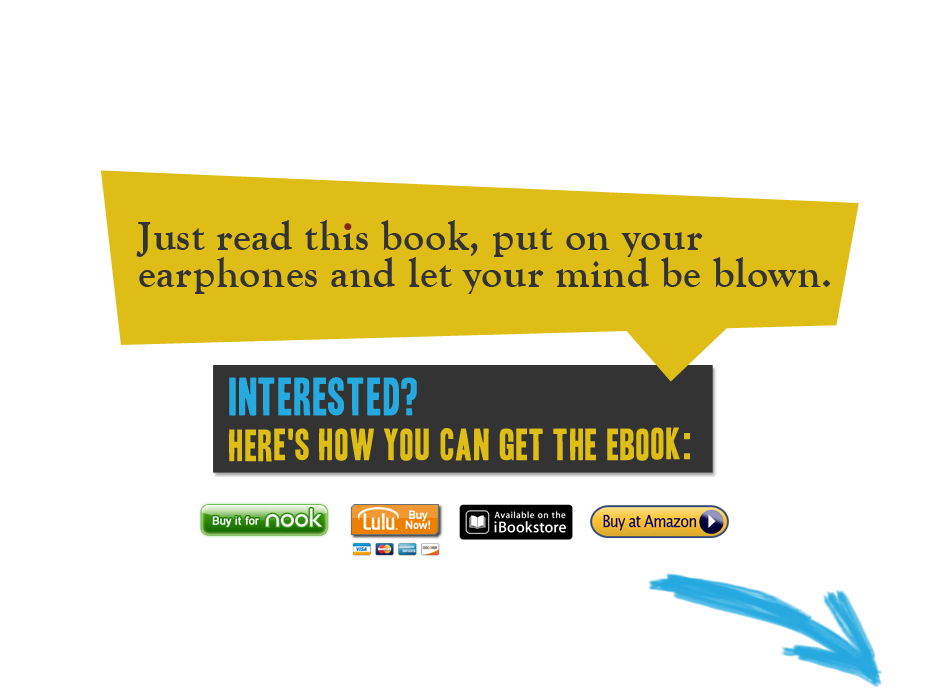
<style>
.page{position:relative;width:950px;height:700px;background:#ffffff}
.page>*{position:absolute;margin:0}
.t1{font:41.7px/37.5px "GoudyOldStyleT-Bold";letter-spacing:0.02em;color:#333333}
.t2{font:39px/45.5px "HeadlineOneHPLHS";letter-spacing:0.025em;color:#ddbd16}
.t3{font:46.7px/45.5px "HeadlineOneHPLHS";letter-spacing:0.025em;color:#25a9df}
</style>
<div class="page">
<p class="t1" style="left:136px;top:220px;width:694px;height:74px">Just read this book, put on your <br>earphones and let your mind be blown.</p>
<p class="t2" style="left:229px;top:377px;width:461px;height:85px"><span class="t3">Interested? <br></span>Here's how you can get the eBook:</p>
</div>
